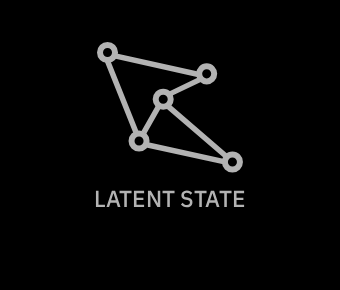
<style>
.page{position:relative;width:340px;height:290px;background:#000000}
.page>*{position:absolute;margin:0}
.t1{font:23.1px "IBMPlexSans-Medium";color:#b3b3b3}
</style>
<div class="page">
<p class="t1" style="left:95px;top:190px;width:150px;height:18px">LATENT STATE</p>
</div>
